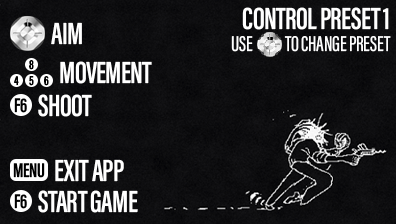
<style>
.page{position:relative;width:396px;height:224px}
.page>*{position:absolute;margin:0}
.t1{font:22px/22px "AcuminConcept-ExtraCondensedMedium";letter-spacing:-0.01em;color:#ffffff}
.t2{font:31.5px/30px "AcuminConcept-ExtraCondensedSemibold";letter-spacing:-0.02em;color:#ffffff}
.t3{font:31.5px "AcuminConcept-ExtraCondensedSemibold";letter-spacing:-0.02em;color:#ffffff}
.t4{font:13.3px "AcuminConcept-ExtraCondensedSemibold";letter-spacing:-0.02em;color:#000000}
.t5{font:20.3px "AcuminConcept-ExtraCondensedSemibold";letter-spacing:-0.02em;color:#000000}
</style>
<div class="page">
<p class="t1" style="left:231px;top:7px;width:160px;height:45px;text-align:right"><span class="t2">CONTROL PRESET 1<br></span>USE            TO CHANGE PRESET</p>
<p class="t3" style="left:51px;top:22px;width:31px;height:23px">AIM</p>
<p class="t4" style="left:29px;top:60px;width:5px;height:10px">8</p>
<p class="t3" style="left:60px;top:61px;width:92px;height:23px">MOVEMENT</p>
<p class="t4" style="left:14px;top:76px;width:5px;height:10px">4</p>
<p class="t4" style="left:29px;top:76px;width:5px;height:10px">5</p>
<p class="t4" style="left:44px;top:76px;width:5px;height:10px">6</p>
<p class="t5" style="left:14px;top:98px;width:13px;height:15px">F6</p>
<p class="t3" style="left:38px;top:94px;width:54px;height:23px">SHOOT</p>
<p class="t3" style="left:55px;top:159px;width:69px;height:23px">EXIT APP</p>
<p class="t5" style="left:13px;top:163px;width:32px;height:15px">MENU</p>
<p class="t5" style="left:14px;top:194px;width:13px;height:15px">F6</p>
<p class="t3" style="left:38px;top:190px;width:100px;height:23px">START GAME</p>
</div>
